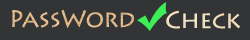
<style>
.page{position:relative;width:250px;height:40px;background:#333436}
.page>*{position:absolute;margin:0}
.t1{font:24px "LithosPro-Regular";letter-spacing:-0.02em;color:#e0b988}
.t2{font:24px "LithosPro-Regular";letter-spacing:-0.02em;color:#f2dfbe}
</style>
<div class="page">
<p class="t1" style="left:12px;top:9px;width:122px;height:19px">PassWord</p>
<p class="t2" style="left:166px;top:10px;width:74px;height:19px">Check</p>
</div>
